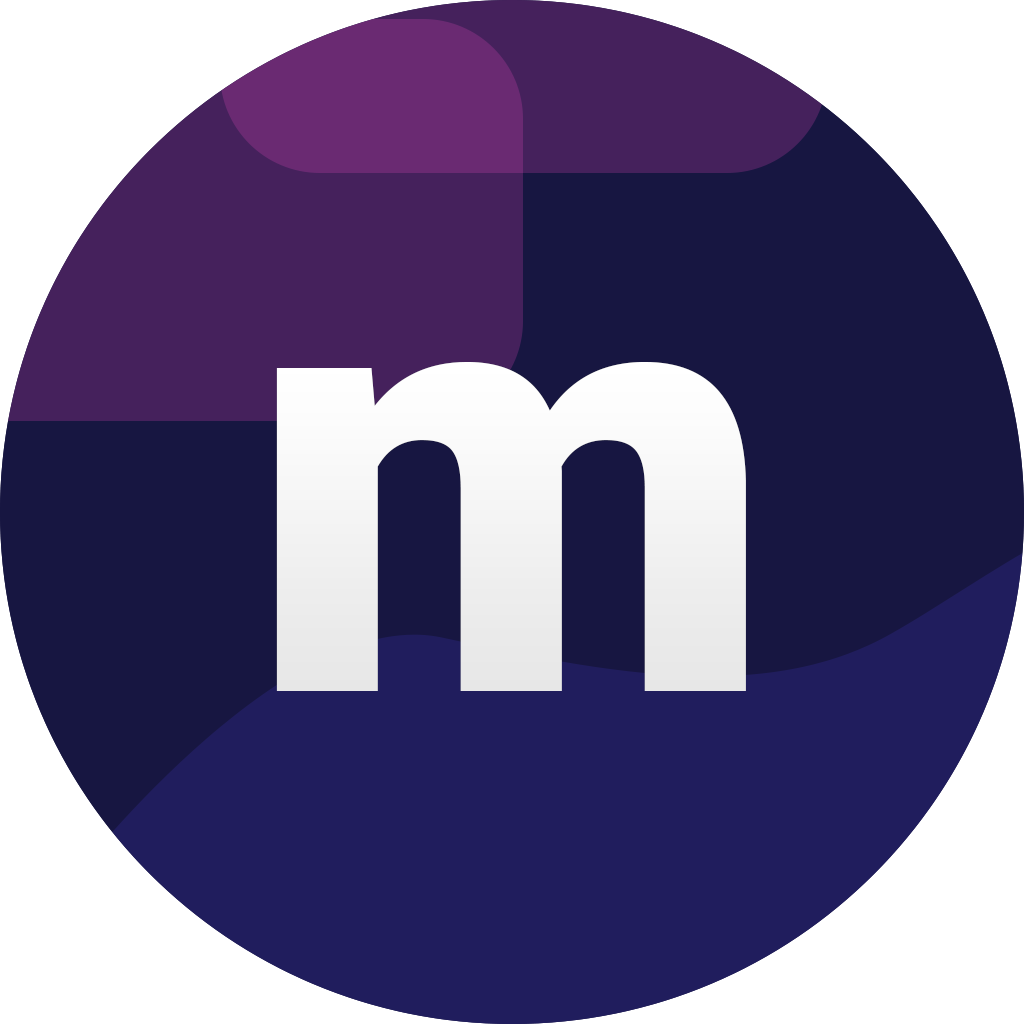
<style>
.page{position:relative;width:1024px;height:1024px;background:#171641}
.page>*{position:absolute;margin:0}
.t1{font:612.1px "Roboto-Black";color:#ffffff}
</style>
<div class="page">
<p class="t1" style="left:276px;top:362px;width:470px;height:329px">m</p>
</div>
